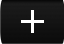
<style>
.page{position:relative;width:64px;height:44px}
.page>*{position:absolute;margin:0}
.t1{font:41.7px "Rockwell";color:#ffffff}
</style>
<div class="page">
<p class="t1" style="left:21px;top:10px;width:23px;height:23px">+</p>
</div>
